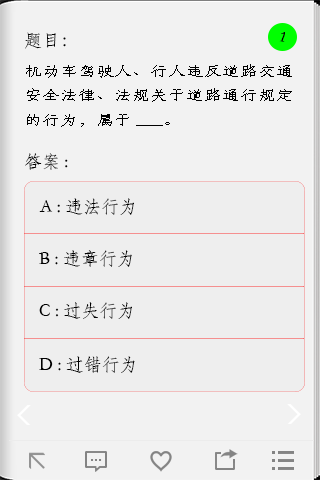
<style>
.page{position:relative;width:320px;height:480px;background:#f2f2f2}
.page>*{position:absolute;margin:0}
.t1{font:18px "STFangsong";color:#000000}
.t2{font:18px "STSong";color:#000000;scale:1.21 1}
.t3{font:14px "STFangsong";color:#000000;scale:1.28 1}
.t4{font:17.9px "STFangsong";color:#000000}
</style>
<div class="page">
<p class="t1" style="left:25px;top:32px;width:41px;height:17px">题目：</p>
<p class="t2" style="left:279px;top:32px;width:6px;height:10px">1</p>
<p class="t3" style="left:26px;top:64px;width:266px;height:63px">机动车驾驶人、行人违反道路交通安全法律、法规关于道路通行规定的行为，属于___。</p>
<p class="t4" style="left:25px;top:153px;width:43px;height:17px">答案:</p>
<p class="t1" style="left:39px;top:198px;width:95px;height:17px">A : 违法行为</p>
<p class="t1" style="left:39px;top:250px;width:93px;height:17px">B :违章行为</p>
<p class="t1" style="left:39px;top:302px;width:93px;height:17px">C : 过失行为</p>
<p class="t1" style="left:39px;top:356px;width:96px;height:17px">D : 过错行为</p>
</div>
